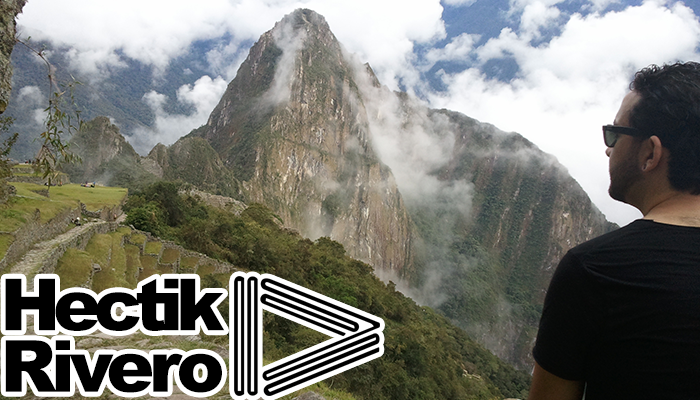
<style>
.page{position:relative;width:700px;height:400px}
.page>*{position:absolute;margin:0}
.t1{font:72px "Arial-Black";letter-spacing:-0.1em;color:#000000}
.t2{font:72px "Arial-Black";letter-spacing:-0.075em;color:#000000}
</style>
<div class="page">
<p class="t1" style="left:5px;top:278px;width:220px;height:115px">Hectik <br><span class="t2">Rivero</span></p>
</div>
